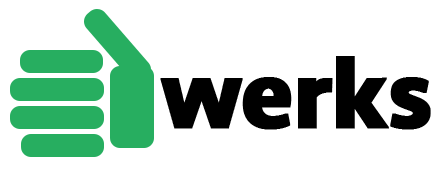
<style>
.page{position:relative;width:440px;height:177px;background:#ffffff}
.page>*{position:absolute;margin:0}
.t1{font:100px "Seravek-Bold";letter-spacing:-0.025em;color:#000000;font-weight:bold}
</style>
<div class="page">
<p class="t1" style="left:160px;top:56px;width:271px;height:74px">werks</p>
</div>
